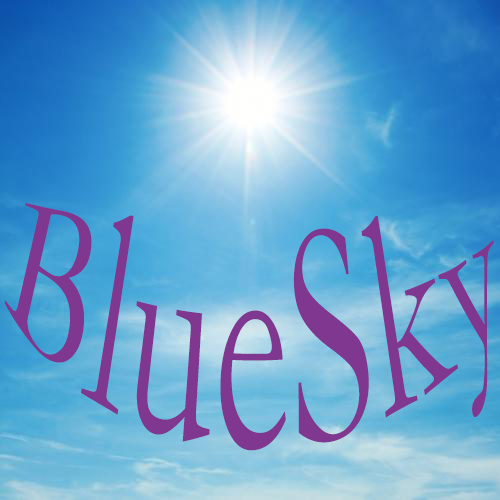
<style>
.page{position:relative;width:500px;height:500px}
.page>*{position:absolute;margin:0}
.t1{font:156px "STKaiti";color:#803790}
</style>
<div class="page">
<p class="t1" style="left:4px;top:203px;width:490px;height:248px">BlueSky</p>
</div>
